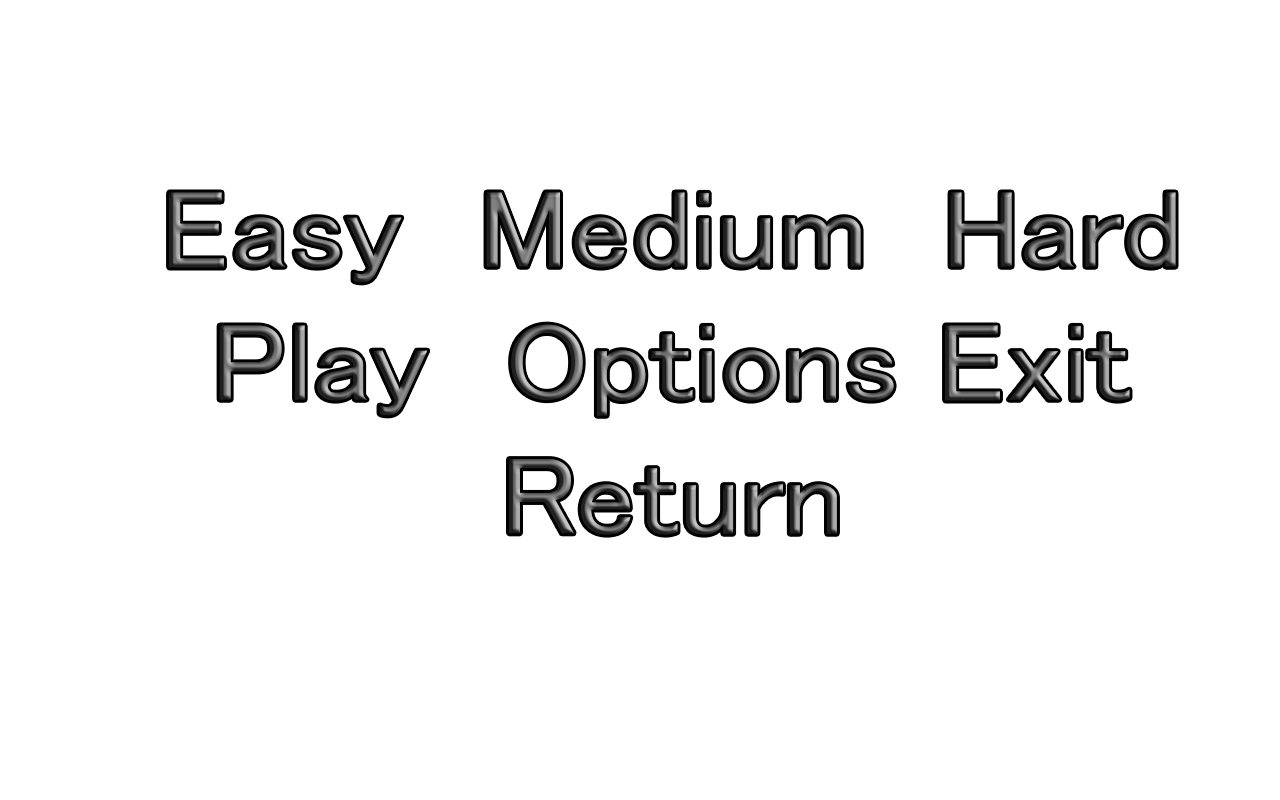
<style>
.page{position:relative;width:1280px;height:800px;background:#ffffff}
.page>*{position:absolute;margin:0}
.t1{font:111.2px "MS-PGothic";scale:1.1 1}
</style>
<div class="page">
<p class="t1" style="left:169px;top:192px;width:1007px;height:343px;text-align:center">Easy  Medium  Hard<br>Play  Options Exit<br>Return</p>
</div>
